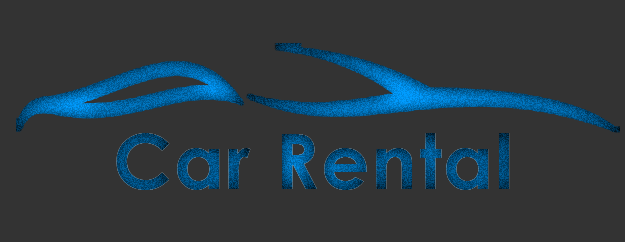
<style>
.page{position:relative;width:625px;height:242px;background:#333333}
.page>*{position:absolute;margin:0}
.t1{font:76.4px "CenturyGothic-Bold";letter-spacing:0.02em}
</style>
<div class="page">
<p class="t1" style="left:116px;top:133px;width:394px;height:57px">Car Rental</p>
</div>
